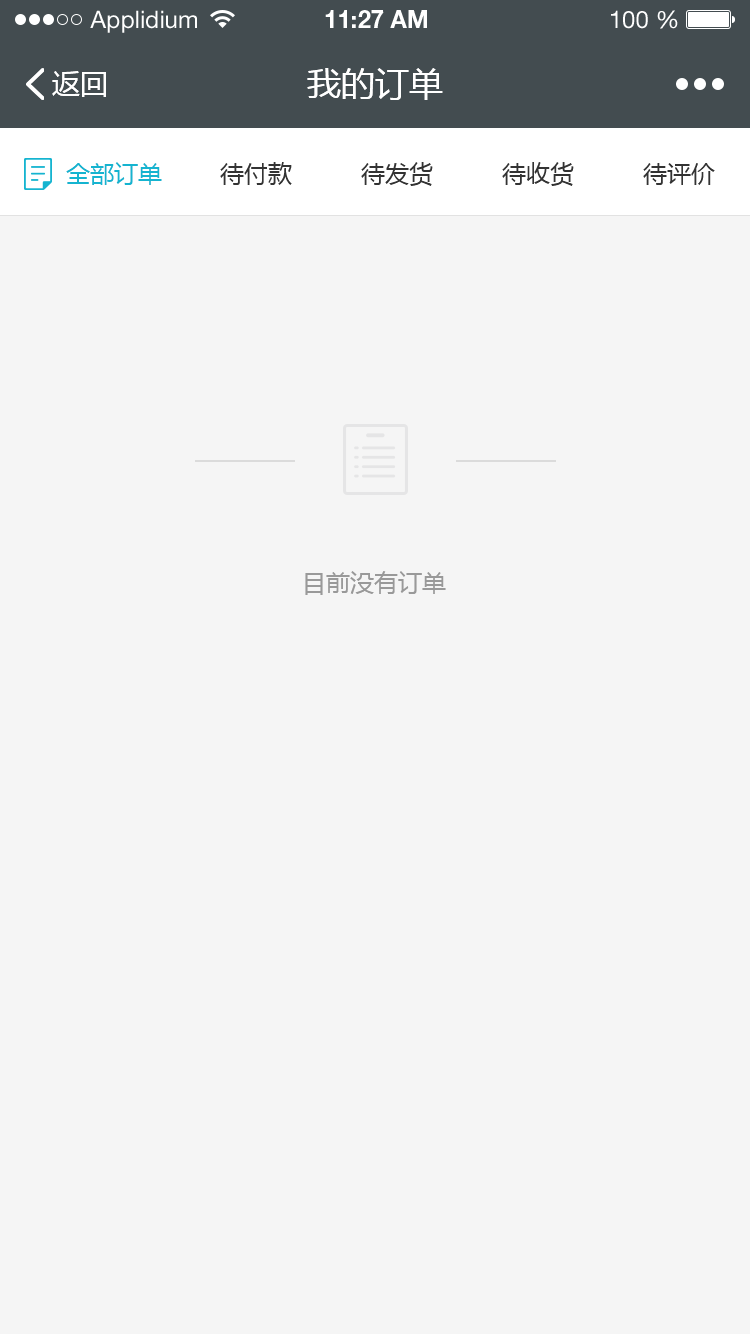
<style>
.page{position:relative;width:750px;height:1334px;background:#f5f5f5}
.page>*{position:absolute;margin:0}
.t1{font:24px "HelveticaNeueLTStd-Roman";color:#ffffff}
.t2{font:24px "HelveticaNeueLTStd-Bd";color:#ffffff}
.t3{font:28px "MicrosoftYaHei";color:#ffffff}
.t4{font:34px "MicrosoftYaHei";color:#ffffff}
.t5{font:24px "MicrosoftYaHei";color:#15b4d0}
.t6{font:24px "MicrosoftYaHei";color:#333333}
.t7{font:24px "MicrosoftYaHei";color:#999999}
</style>
<div class="page">
<p class="t1" style="left:90px;top:10px;width:107px;height:23px">Applidium</p>
<p class="t2" style="left:325px;top:10px;width:102px;height:18px">11:27 AM</p>
<p class="t1" style="left:611px;top:10px;width:67px;height:19px">100 %</p>
<p class="t3" style="left:52px;top:71px;width:54px;height:26px">返回</p>
<p class="t4" style="left:307px;top:68px;width:136px;height:32px">我的订单</p>
<p class="t5" style="left:66px;top:162px;width:96px;height:23px">全部订单</p>
<p class="t6" style="left:220px;top:162px;width:72px;height:23px">待付款</p>
<p class="t6" style="left:361px;top:162px;width:72px;height:24px">待发货</p>
<p class="t6" style="left:502px;top:162px;width:72px;height:24px">待收货</p>
<p class="t6" style="left:643px;top:163px;width:72px;height:22px">待评价</p>
<p class="t7" style="left:305px;top:571px;width:141px;height:24px">目前没有订单</p>
</div>
